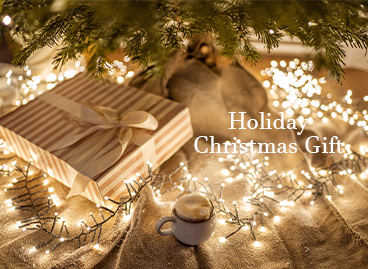
<style>
.page{position:relative;width:368px;height:269px}
.page>*{position:absolute;margin:0}
.t1{font:24px "JavaneseText";color:#ffffff}
</style>
<div class="page">
<p class="t1" style="left:228px;top:112px;width:82px;height:23px">Holiday</p>
<p class="t1" style="left:194px;top:136px;width:150px;height:17px">Christmas Gift</p>
</div>
